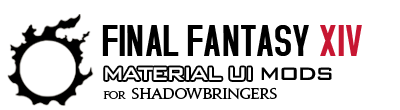
<style>
.page{position:relative;width:400px;height:110px;background:#ffffff}
.page>*{position:absolute;margin:0}
.t1{font:48px "AccidentalPresidency";color:#000000}
.t2{font:48px "AccidentalPresidency";color:#c71632}
.t3{font:24px "BankGothicBold";letter-spacing:-0.1em;color:#ffffff}
.t4{font:14px "JupiterPro-Bold";letter-spacing:-0.05em;color:#000000}
.t5{font:10px "JupiterPro-Bold";letter-spacing:-0.05em;color:#000000}
</style>
<div class="page">
<p class="t1" style="left:102px;top:25px;width:260px;height:31px">FINAL FANTASY <span class="t2">XIV</span></p>
<p class="t3" style="left:105px;top:67px;width:146px;height:13px">MATERIAL UI</p>
<p class="t4" style="left:103px;top:87px;width:174px;height:13px"><span class="t5">for </span>shadowbringers</p>
</div>
